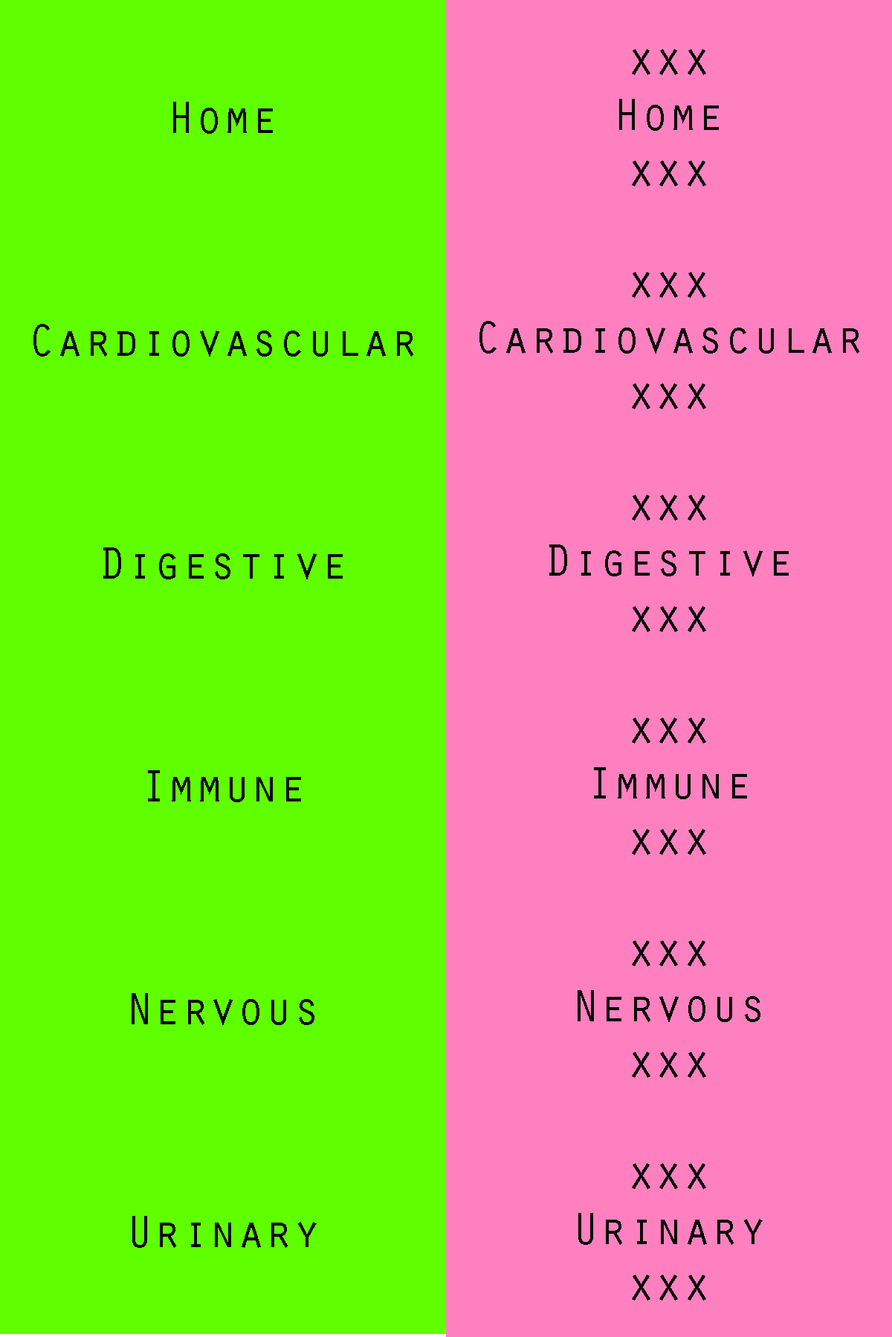
<style>
.page{position:relative;width:892px;height:1337px;background:#5fff00}
.page>*{position:absolute;margin:0}
.t1{font:46.4px "OratorStd";color:#060808}
</style>
<div class="page">
<p class="t1" style="left:479px;top:49px;width:380px;height:1252px;text-align:center">xxx<br>Home<br>xxx<br><br>xxx<br>Cardiovascular<br>xxx<br><br>xxx<br>Digestive<br>xxx<br><br>xxx<br>Immune<br>xxx<br><br>xxx<br>Nervous<br>xxx<br><br>xxx<br>Urinary<br>xxx</p>
<p class="t1" style="left:33px;top:102px;width:380px;height:1146px;text-align:center">Home<br><br><br><br>Cardiovascular<br><br><br><br>Digestive<br><br><br><br>Immune<br><br><br><br>Nervous<br><br><br><br>Urinary</p>
</div>
